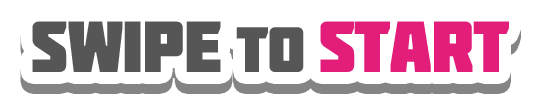
<style>
.page{position:relative;width:536px;height:105px;background:#ffffff}
.page>*{position:absolute;margin:0}
.t1{font:72px "Molot";letter-spacing:-0.02em;color:#e21d7a}
.t2{font:72px "Molot";letter-spacing:-0.02em;color:#565656}
.t3{font:72px "Molot";letter-spacing:0.2em;color:#565656}
.t4{font:64px "Molot";letter-spacing:-0.02em;color:#565656}
.t5{font:64px "Molot";letter-spacing:0.2em;color:#565656}
.t6{font:72px "Molot";letter-spacing:-0.02em}
.t7{font:72px "Molot";letter-spacing:0.2em}
.t8{font:64px "Molot";letter-spacing:-0.02em}
.t9{font:64px "Molot";letter-spacing:0.2em}
</style>
<div class="page">
<p class="t1" style="left:32px;top:21px;width:477px;height:51px"><span class="t2">swip</span><span class="t3">e</span><span class="t4">t</span><span class="t5">o</span>start</p>
<p class="t6" style="left:32px;top:31px;width:477px;height:51px">swip<span class="t7">e</span><span class="t8">t</span><span class="t9">o</span>start</p>
</div>
